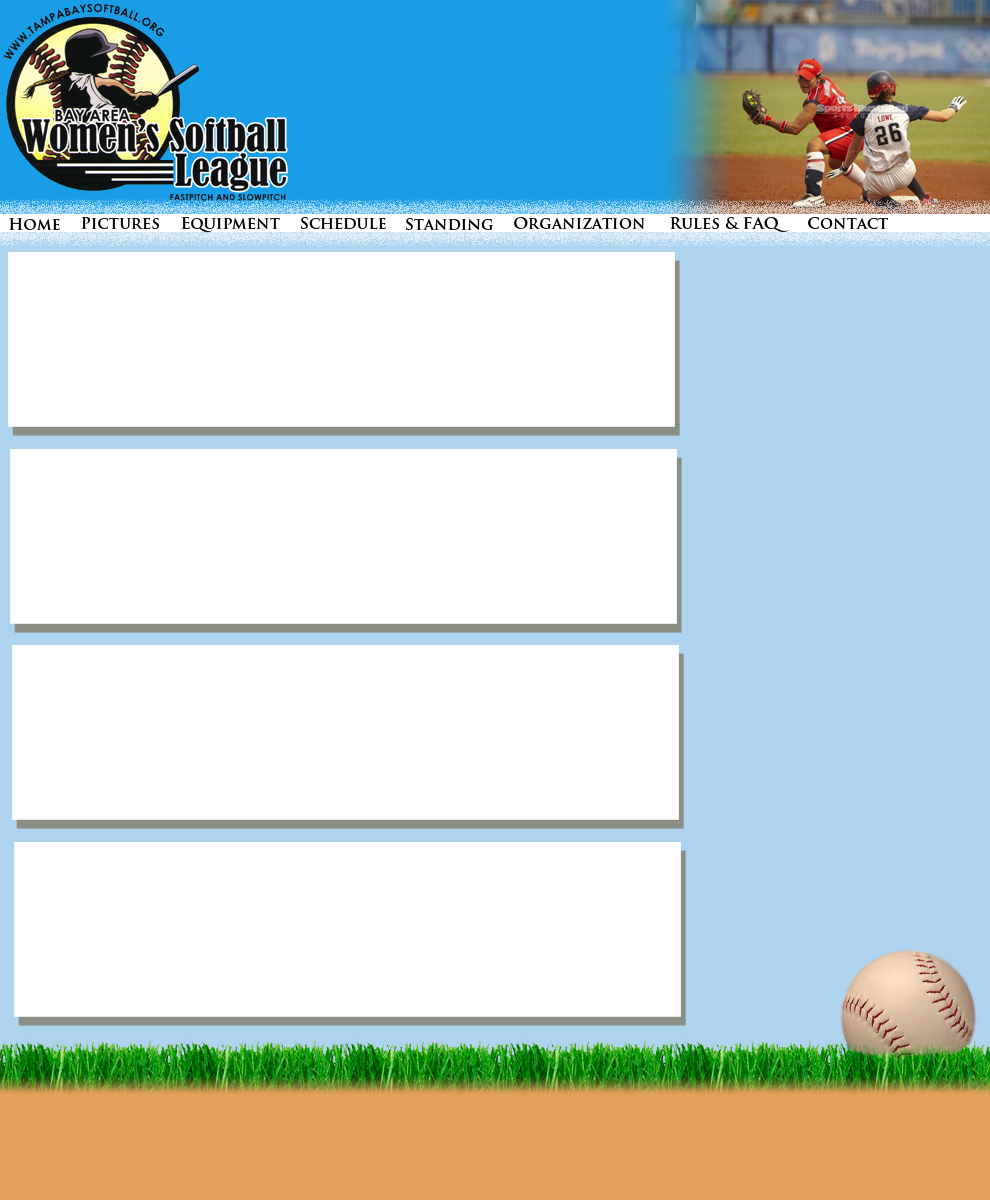
<style>
.page{position:relative;width:990px;height:1200px;background:#ffffff}
.page>*{position:absolute;margin:0}
.t1{font:16px "TrajanPro-Bold";color:#000000}
</style>
<div class="page">
<p class="t1" style="left:9px;top:218px;width:51px;height:12px">Home</p>
<p class="t1" style="left:81px;top:217px;width:78px;height:12px">Pictures</p>
<p class="t1" style="left:181px;top:217px;width:99px;height:16px">Equipment</p>
<p class="t1" style="left:301px;top:217px;width:85px;height:12px">Schedule</p>
<p class="t1" style="left:406px;top:218px;width:87px;height:12px">Standing</p>
<p class="t1" style="left:514px;top:217px;width:131px;height:12px">Organization</p>
<p class="t1" style="left:670px;top:217px;width:119px;height:15px">Rules &amp; FAQ</p>
<p class="t1" style="left:808px;top:217px;width:80px;height:12px">Contact</p>
</div>
